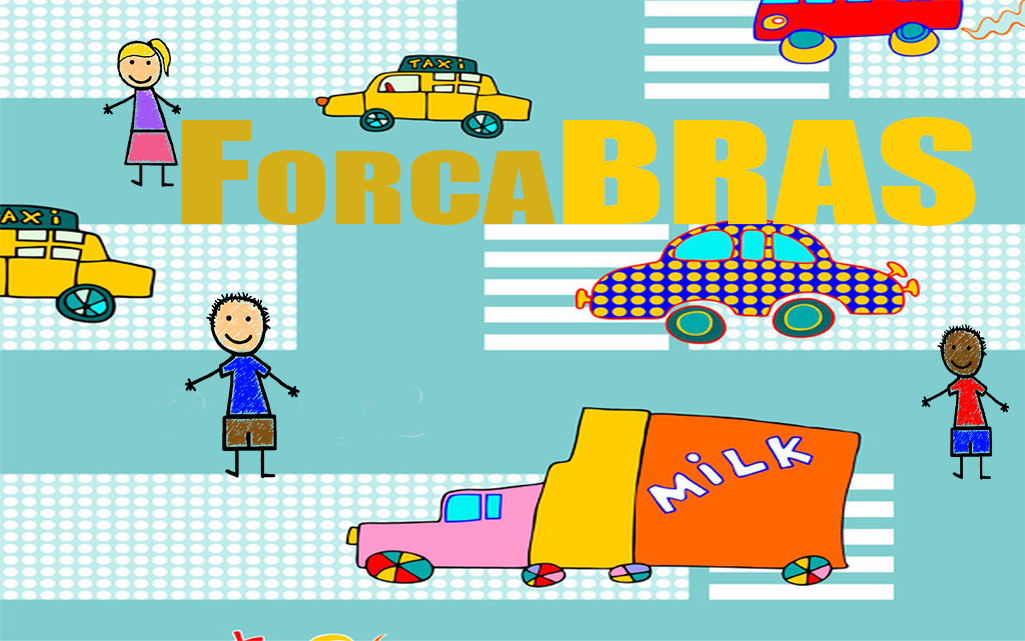
<style>
.page{position:relative;width:1025px;height:641px;background:#7fcdcf}
.page>*{position:absolute;margin:0}
.t1{font:226.4px "Impact";color:#d4af1a;font-variant:small-caps;scale:1.52 1}
.t2{font:169.8px "SegoeScript-Bold";color:#036c6f;font-variant:small-caps;scale:1.52 1}
.t3{font:226.4px "Impact";color:#fece07;font-variant:small-caps;scale:1.52 1}
</style>
<div class="page">
<p class="t1" style="left:181px;top:117px;width:795px;height:109px"><span class="t2">    </span>Forca<span class="t3">BRAS</span></p>
</div>
